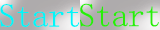
<style>
.page{position:relative;width:160px;height:30px}
.page>*{position:absolute;margin:0}
.t1{font:33px "SimSun";color:#00f7fa}
.t2{font:33px "SimSun";color:#27ef07}
</style>
<div class="page">
<p class="t1" style="left:0px;top:4px;width:80px;height:23px">Start</p>
<p class="t2" style="left:80px;top:3px;width:79px;height:24px">Start</p>
</div>
